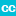
<style>
.page{position:relative;width:16px;height:16px;background:#00bfd8}
.page>*{position:absolute;margin:0}
.t1{font:12.5px "HelveticaNeue-Bold";color:#ffffff}
</style>
<div class="page">
<p class="t1" style="left:1px;top:5px;width:15px;height:7px">cc</p>
</div>
